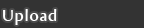
<style>
.page{position:relative;width:144px;height:28px;background:#333333}
.page>*{position:absolute;margin:0}
.t1{font:16px "AmiraParadiso";letter-spacing:0.05em;color:#ffffff}
</style>
<div class="page">
<p class="t1" style="left:3px;top:9px;width:54px;height:16px">Upload</p>
</div>
